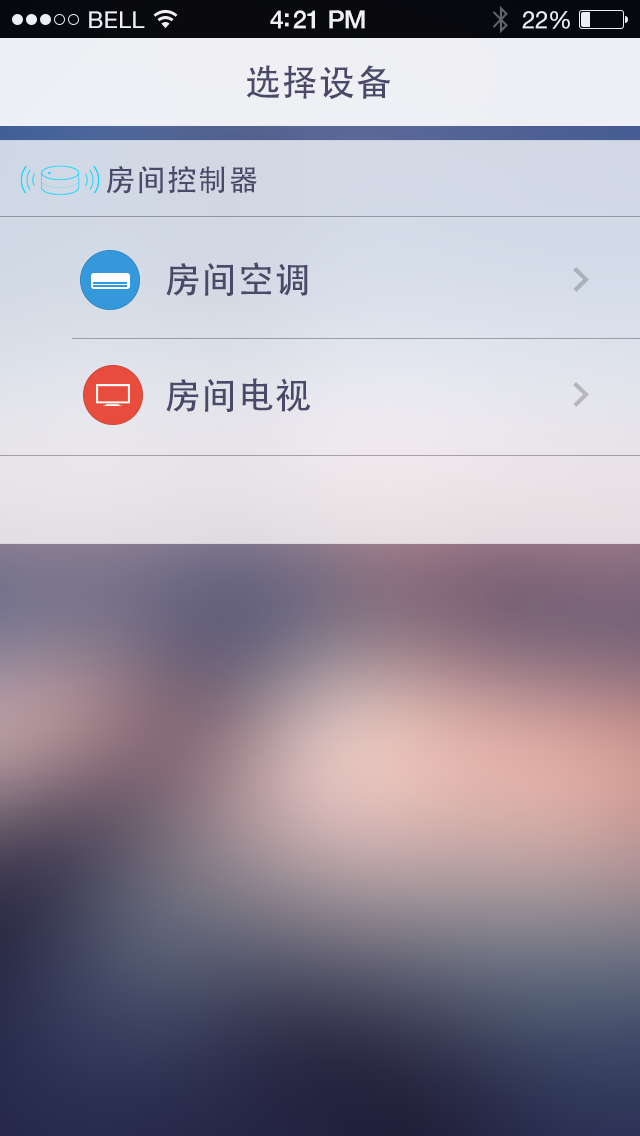
<style>
.page{position:relative;width:640px;height:1136px}
.page>*{position:absolute;margin:0}
.t1{font:23px "HelveticaNeue";letter-spacing:0.02em;color:#ffffff}
.t2{font:25px "HelveticaNeue-Medium";letter-spacing:-0.02em;color:#ffffff}
.t3{font:24px "HelveticaNeue";letter-spacing:-0.02em;color:#ffffff}
.t4{font:36px "AdobeHeitiStd-Regular";letter-spacing:0.025em;color:#4b4969}
.t5{font:30px "AdobeHeitiStd-Regular";letter-spacing:0.025em;color:#4b4969}
</style>
<div class="page">
<p class="t1" style="left:89px;top:11px;width:56px;height:17px">BELL</p>
<p class="t2" style="left:270px;top:10px;width:95px;height:19px">4:21 PM</p>
<p class="t3" style="left:522px;top:11px;width:48px;height:18px">22%</p>
<p class="t4" style="left:246px;top:65px;width:145px;height:34px">选择设备</p>
<p class="t5" style="left:106px;top:166px;width:151px;height:28px">房间控制器</p>
<p class="t4" style="left:166px;top:262px;width:142px;height:35px">房间空调</p>
<p class="t4" style="left:166px;top:378px;width:144px;height:35px">房间电视</p>
</div>
